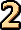
<style>
.page{position:relative;width:21px;height:30px;background:#000000}
.page>*{position:absolute;margin:0}
.t1{font:36px "MicrosoftNewTaiLue-Bold";color:#ffdb9c}
</style>
<div class="page">
<p class="t1" style="left:2px;top:2px;width:17px;height:26px">2</p>
</div>
